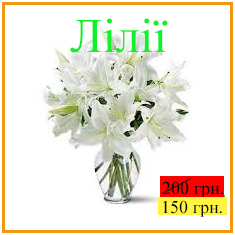
<style>
.page{position:relative;width:235px;height:235px;background:#ffffff}
.page>*{position:absolute;margin:0}
.t1{font:48px "TimesNewRomanPSMT";color:#0ef12c}
.t2{font:18px "TimesNewRomanPSMT";color:#0b0b0b}
</style>
<div class="page">
<p class="t1" style="left:70px;top:18px;width:98px;height:35px">Лілії</p>
<p class="t2" style="left:163px;top:200px;width:59px;height:17px">150 грн.</p>
</div>
